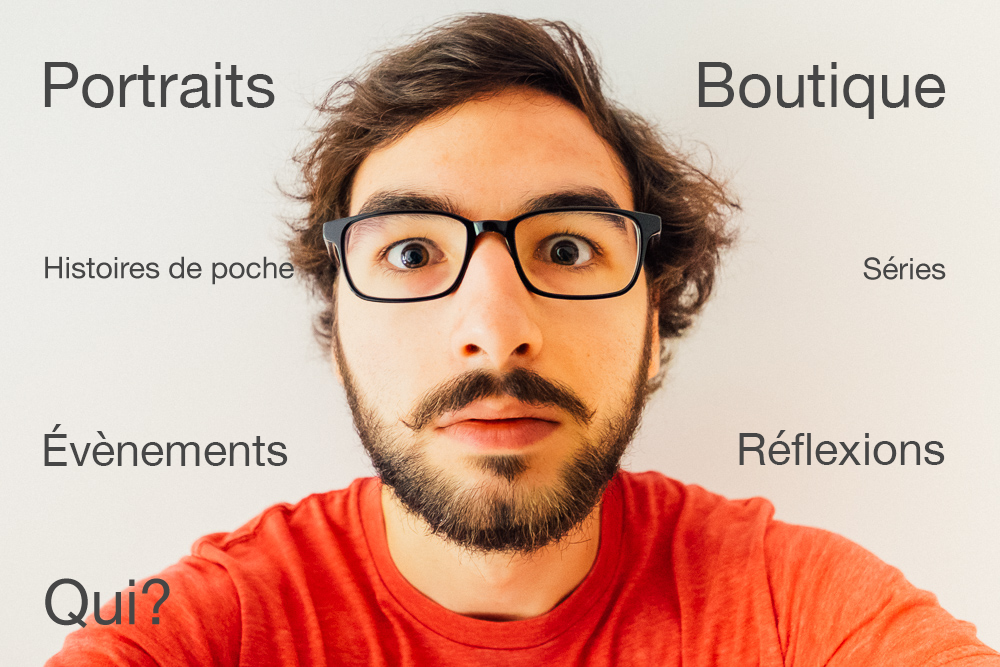
<style>
.page{position:relative;width:1000px;height:667px}
.page>*{position:absolute;margin:0}
.t1{font:62.5px "HelveticaNeue";color:#464646}
.t2{font:45px "HelveticaNeue";color:#464646}
</style>
<div class="page">
<p class="t1" style="left:44px;top:62px;width:231px;height:46px">Portraits</p>
<p class="t1" style="left:698px;top:62px;width:248px;height:57px">Boutique</p>
<p class="t2" style="left:44px;top:424px;width:244px;height:42px">Évènements</p>
<p class="t2" style="left:739px;top:430px;width:206px;height:35px">Réflexions</p>
</div>
